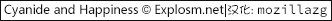
<style>
.page{position:relative;width:332px;height:21px;background:#ffffff}
.page>*{position:absolute;margin:0}
.t1{font:12px "MicrosoftYaHeiUI";color:#111111}
.t2{font:12px "ArialMT";color:#111111}
.t3{font:12px "DFGirl";color:#000000}
.t4{font:13px "SourceCodePro-Regular";color:#000000}
</style>
<div class="page">
<p class="t1" style="left:4px;top:4px;width:323px;height:13px">Cyanide and Happiness<span class="t2"> © </span>Explosm.net|<span class="t3">汉化: </span><span class="t4">mozillazg</span></p>
</div>
